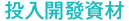
<style>
.page{position:relative;width:129px;height:21px;background:#ffffff}
.page>*{position:absolute;margin:0}
.t1{font:20px "GothicMB101Pr6N-Medium";color:#1cbbbe}
</style>
<div class="page">
<p class="t1" style="left:5px;top:0px;width:119px;height:20px">投入開發資材</p>
</div>
